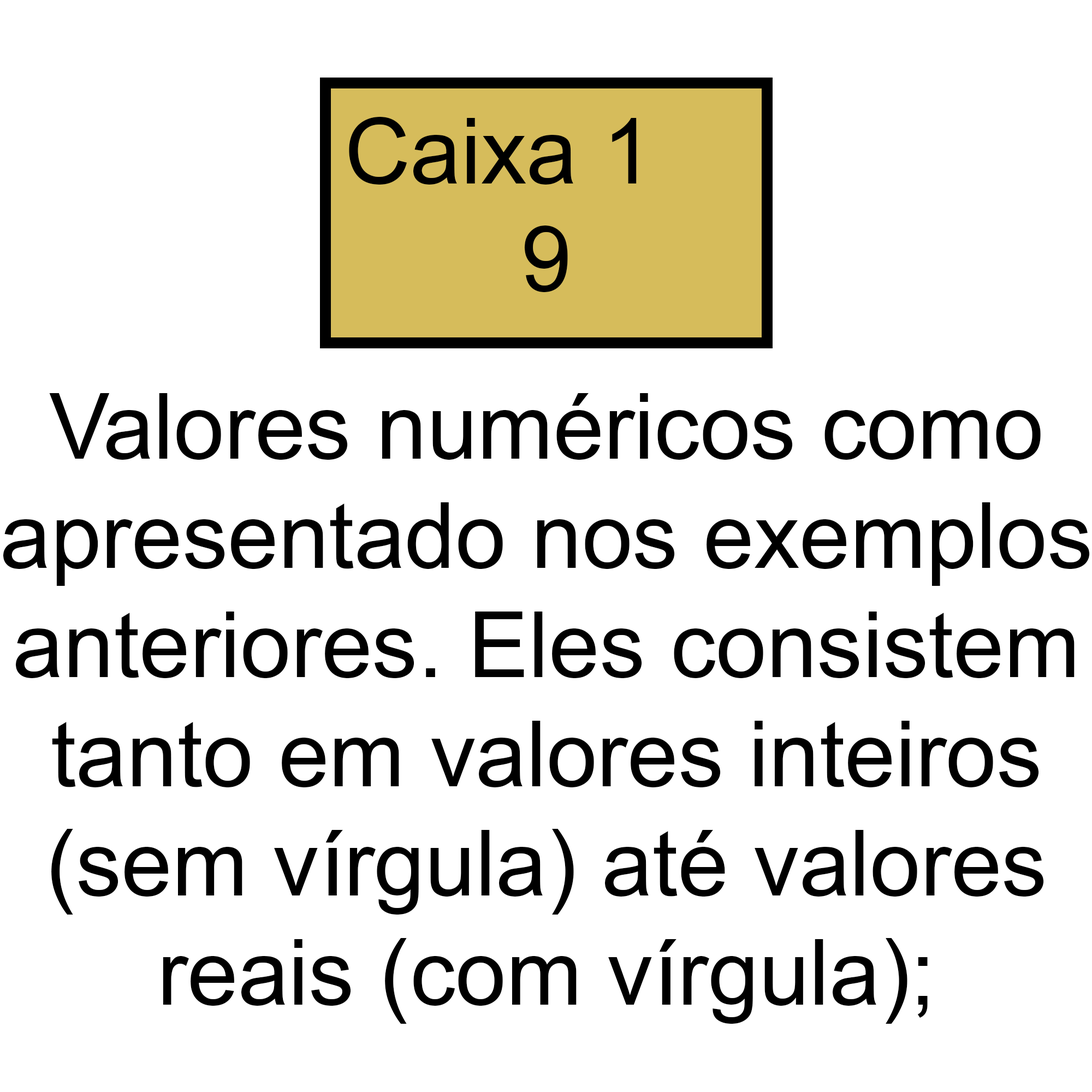
<style>
.page{position:relative;width:1092px;height:1092px;background:#ffffff}
.page>*{position:absolute;margin:0}
.t1{font:91px "ArialMT";color:#000000}
</style>
<div class="page">
<p class="t1" style="left:349px;top:117px;width:288px;height:68px">Caixa 1</p>
<p class="t1" style="left:524px;top:225px;width:44px;height:67px">9</p>
<p class="t1" style="left:3px;top:393px;width:1087px;height:631px;text-align:center">Valores numéricos como<br>apresentado nos exemplos<br>anteriores. Eles consistem<br>tanto em valores inteiros<br>(sem vírgula) até valores<br>reais (com vírgula);</p>
</div>
